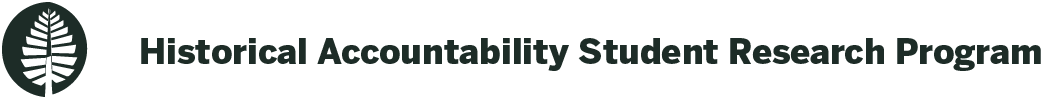
<style>
.page{position:relative;width:1043px;height:99px;background:#ffffff}
.page>*{position:absolute;margin:0}
.t1{font:34.2px "BentonSans-Black";color:#1d2c27}
</style>
<div class="page">
<p class="t1" style="left:141px;top:38px;width:900px;height:33px">Historical Accountability Student Research Program</p>
</div>
